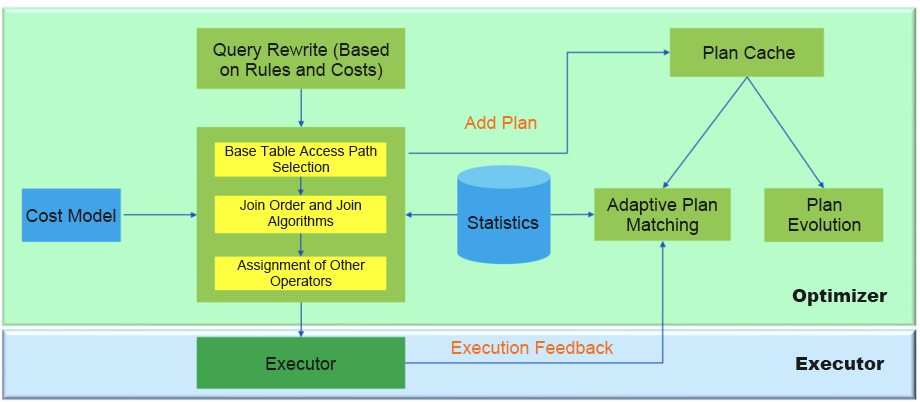
<style>
.page{position:relative;width:920px;height:402px;background:#b8fdc9}
.page>*{position:absolute;margin:0}
.t1{font:18px/20px "ArialMT";color:#1b1b1b}
.t2{font:18px "ArialMT";color:#1b1b1b}
.t3{font:18px "ArialMT";color:#ee751d}
.t4{font:14px/16px "ArialMT";color:#1b1b1b}
.t5{font:18px "Arial-Black";color:#1b1b1b}
</style>
<div class="page">
<p class="t1" style="left:213px;top:43px;width:176px;height:37px;text-align:center">Query Rewrite (Based on Rules and Costs)</p>
<p class="t2" style="left:703px;top:46px;width:92px;height:13px">Plan Cache</p>
<p class="t3" style="left:464px;top:116px;width:73px;height:13px">Add Plan</p>
<p class="t4" style="left:225px;top:145px;width:152px;height:27px;text-align:center">Base Table Access Path Selection</p>
<p class="t1" style="left:606px;top:198px;width:111px;height:37px;text-align:center">Adaptive Plan Matching</p>
<p class="t1" style="left:788px;top:198px;width:73px;height:33px;text-align:center">Plan Evolution</p>
<p class="t2" style="left:26px;top:209px;width:90px;height:13px">Cost Model</p>
<p class="t4" style="left:240px;top:200px;width:121px;height:29px;text-align:center">Join Order and Join Algorithms</p>
<p class="t2" style="left:467px;top:216px;width:72px;height:13px">Statistics</p>
<p class="t4" style="left:237px;top:259px;width:129px;height:30px;text-align:center">Assignment of Other Operators</p>
<p class="t5" style="left:792px;top:289px;width:96px;height:17px">Optimizer</p>
<p class="t3" style="left:451px;top:341px;width:163px;height:13px">Execution Feedback</p>
<p class="t2" style="left:266px;top:357px;width:71px;height:13px">Executor</p>
<p class="t5" style="left:796px;top:357px;width:89px;height:13px">Executor</p>
</div>
